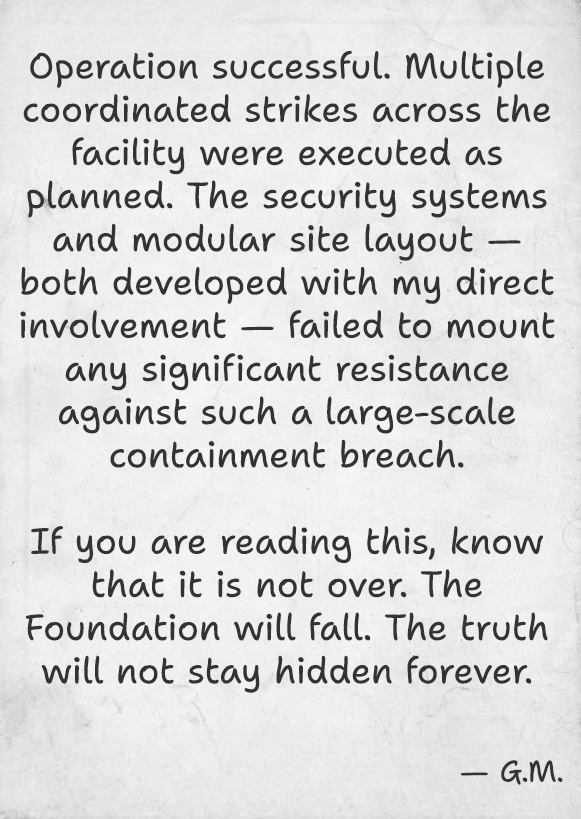
<style>
.page{position:relative;width:581px;height:819px}
.page>*{position:absolute;margin:0}
.t1{font:36px "ShantellSans-Regular";color:#333333}
.t2{font:30px "ShantellSans-Regular";color:#333333}
</style>
<div class="page">
<p class="t1" style="left:20px;top:50px;width:543px;height:735px;text-align:center">Operation successful. Multiple coordinated strikes across the facility were executed as planned. The security systems and modular site layout — both developed with my direct involvement — failed to mount any significant resistance against such a large-scale containment breach.<br><br>If you are reading this, know that it is not over. The Foundation will fall. The truth will not stay hidden forever.<br><br><br><span class="t2">— G.M.</span></p>
</div>
